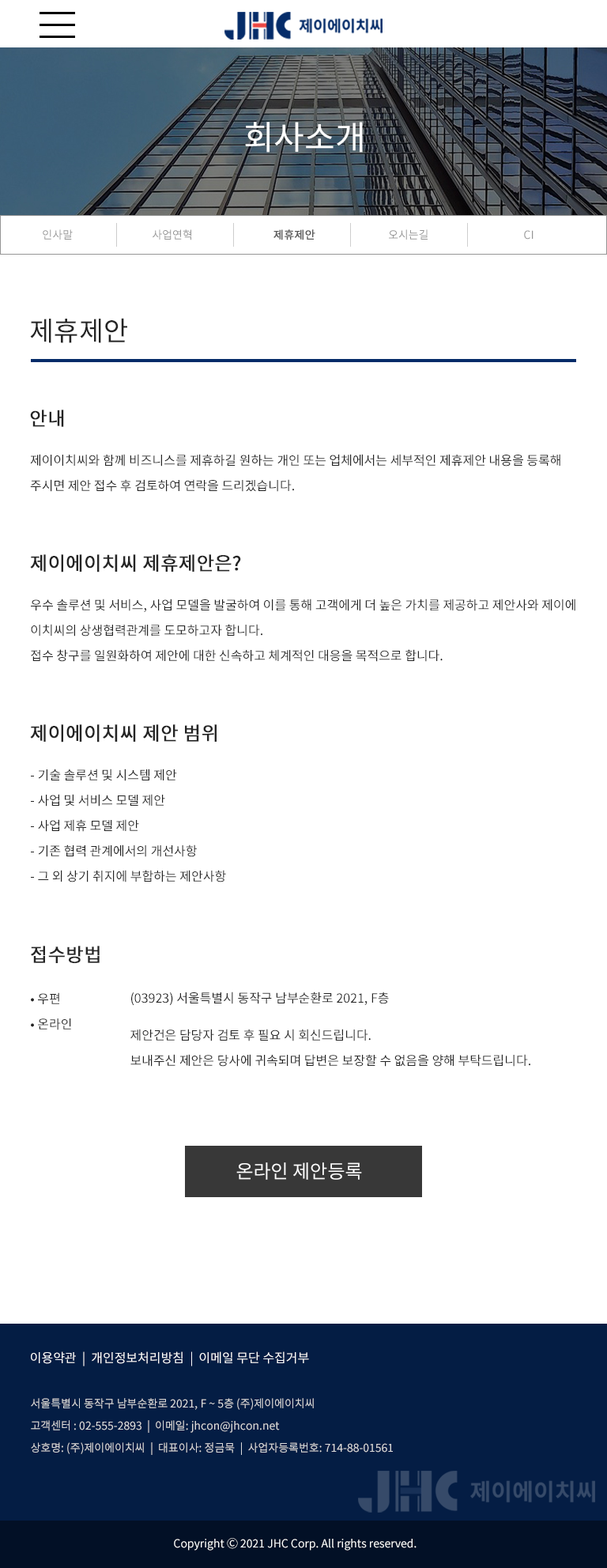
<style>
.page{position:relative;width:607px;height:1568px;background:#ffffff}
.page>*{position:absolute;margin:0}
.t1{font:33.2px "NotoSansKR-Regular";color:#ffffff}
.t2{font:11.1px "NotoSansKR-Regular";color:#959595}
.t3{font:11.1px "NotoSansKR-Regular";color:#595959;font-weight:bold}
.t4{font:26.9px "NotoSansKR-Regular";color:#242424}
.t5{font:19px "NotoSansKR-Regular";color:#242424;font-weight:bold}
.t6{font:12.7px/25.3px "NotoSansKR-Regular";color:#242424}
.t7{font:12.7px "NotoSansKR-Regular";color:#242424}
.t8{font:19px "NotoSansKR-Regular";color:#ffffff}
.t9{font:12.7px "NotoSansKR-Regular";color:#ffffff}
.t10{font:11.1px/22.1px "NotoSansKR-Regular";color:#dddddd}
.t11{font:11.1px "NotoSansKR-Regular";color:#ffffff}
</style>
<div class="page">
<p class="t1" style="left:245px;top:122px;width:118px;height:31px">회사소개</p>
<p class="t2" style="left:43px;top:229px;width:30px;height:11px">인사말</p>
<p class="t2" style="left:153px;top:229px;width:38px;height:11px">사업연혁</p>
<p class="t3" style="left:274px;top:229px;width:41px;height:11px">제휴제안</p>
<p class="t2" style="left:389px;top:229px;width:39px;height:11px">오시는길</p>
<p class="t2" style="left:524px;top:230px;width:10px;height:10px">CI</p>
<p class="t4" style="left:30px;top:318px;width:97px;height:25px">제휴제안</p>
<p class="t5" style="left:30px;top:410px;width:34px;height:17px">안내</p>
<p class="t6" style="left:30px;top:454px;width:531px;height:38px">제이이치씨와 함께 비즈니스를 제휴하길 원하는 개인 또는 업체에서는 세부적인 제휴제안 내용을 등록해<br>주시면 제안 접수 후 검토하여 연락을 드리겠습니다.</p>
<p class="t5" style="left:30px;top:554px;width:211px;height:18px">제이에이치씨 제휴제안은?</p>
<p class="t6" style="left:31px;top:599px;width:545px;height:63px">우수 솔루션 및 서비스, 사업 모델을 발굴하여 이를 통해 고객에게 더 높은 가치를 제공하고 제안사와 제이에<br>이치씨의 상생협력관계를 도모하고자 합니다. <br>접수 창구를 일원화하여 제안에 대한 신속하고 체계적인 대응을 목적으로 합니다.</p>
<p class="t5" style="left:30px;top:724px;width:187px;height:18px">제이에이치씨 제안 범위</p>
<p class="t6" style="left:31px;top:769px;width:195px;height:113px">- 기술 솔루션 및 시스템 제안<br>- 사업 및 서비스 모델 제안<br>- 사업 제휴 모델 제안<br>- 기존 협력 관계에서의 개선사항<br>- 그 외 상기 취지에 부합하는 제안사항</p>
<p class="t5" style="left:31px;top:946px;width:69px;height:17px">접수방법</p>
<p class="t6" style="left:31px;top:992px;width:40px;height:38px">• 우편<br>• 온라인</p>
<p class="t7" style="left:131px;top:992px;width:258px;height:14px">(03923) 서울특별시 동작구 남부순환로 2021, F층</p>
<p class="t6" style="left:130px;top:1029px;width:401px;height:38px">제안건은 담당자 검토 후 필요 시 회신드립니다.<br>보내주신 제안은 당사에 귀속되며 답변은 보장할 수 없음을 양해 부탁드립니다.</p>
<p class="t8" style="left:236px;top:1162px;width:126px;height:18px">온라인 제안등록</p>
<p class="t9" style="left:31px;top:1351px;width:278px;height:15px">이용약관  |  개인정보처리방침  |  이메일 무단 수집거부</p>
<p class="t10" style="left:31px;top:1398px;width:362px;height:57px">서울특별시 동작구 남부순환로 2021, F ~ 5층 (주)제이에이치씨<br>고객센터 : 02-555-2893  |  이메일: jhcon@jhcon.net<br>상호명: (주)제이에이치씨  |  대표이사: 정금묵  |  사업자등록번호: 714-88-01561</p>
<p class="t11" style="left:174px;top:1538px;width:243px;height:13px">Copyright Ⓒ 2021 JHC Corp. All rights reserved.</p>
</div>
